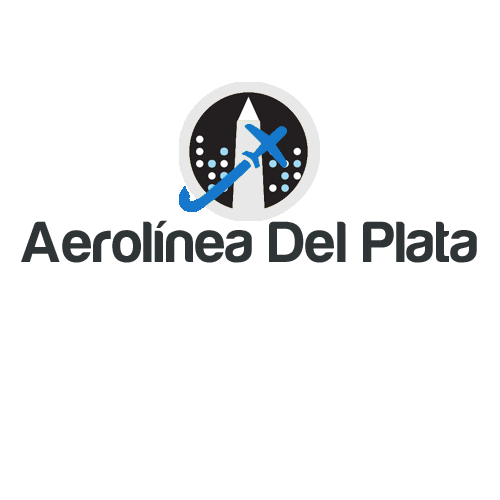
<style>
.page{position:relative;width:500px;height:500px;background:#ffffff}
.page>*{position:absolute;margin:0}
.t1{font:60px "Harabara";letter-spacing:0.02em;color:#2f3436}
</style>
<div class="page">
<p class="t1" style="left:21px;top:220px;width:456px;height:43px">Aerolínea Del Plata</p>
</div>
